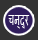
<style>
.page{position:relative;width:38px;height:40px;background:#333333}
.page>*{position:absolute;margin:0}
.t1{font:15.7px "Mangal";color:#ffffff;scale:0.54 1}
</style>
<div class="page">
<p class="t1" style="left:8px;top:15px;width:22px;height:14px">चन्द्र</p>
</div>
